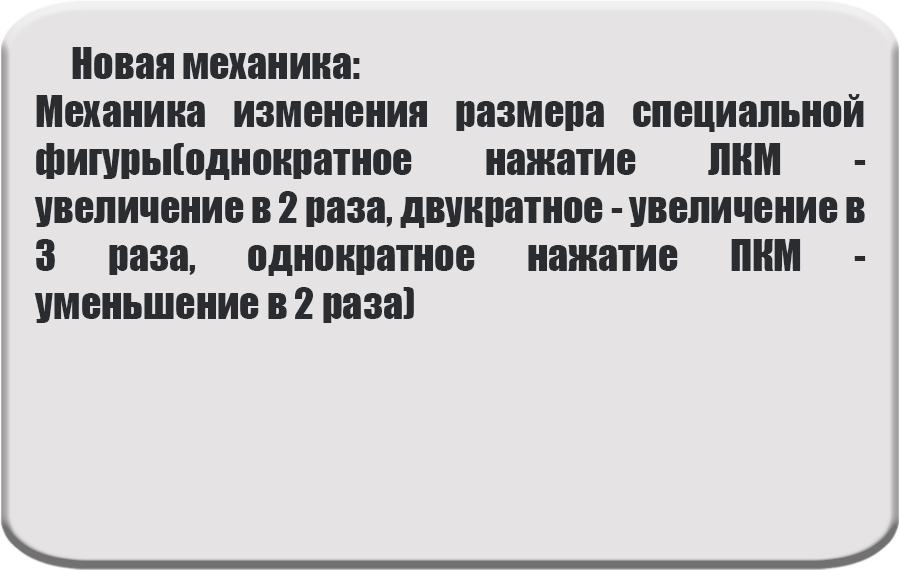
<style>
.page{position:relative;width:900px;height:570px;background:#e5e3e3}
.page>*{position:absolute;margin:0}
.t1{font:40px "Impact";color:#2a2c30}
</style>
<div class="page">
<p class="t1" style="left:34px;top:47px;width:832px;height:276px;text-align:justify">Новая механика:<br>Механика изменения размера специальной фигуры(однократное нажатие ЛКМ - увеличение в 2 раза, двукратное - увеличение в 3 раза, однократное нажатие ПКМ - уменьшение в 2 раза)</p>
</div>
